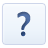
<style>
.page{position:relative;width:48px;height:48px}
.page>*{position:absolute;margin:0}
.t1{font:35px "BerlinSansFB-Reg"}
</style>
<div class="page">
<p class="t1" style="left:17px;top:11px;width:14px;height:26px">?</p>
</div>
